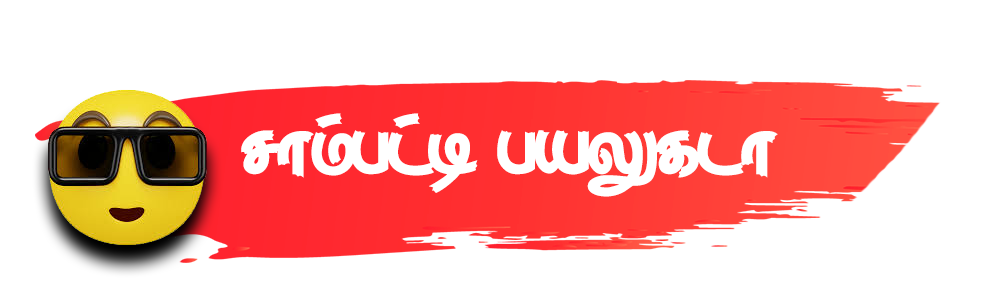
<style>
.page{position:relative;width:1000px;height:300px;background:#ffffff}
.page>*{position:absolute;margin:0}
.t1{font:107.7px "BAMINI-Tamil24";letter-spacing:-0.04em;color:#ffffff}
</style>
<div class="page">
<p class="t1" style="left:241px;top:113px;width:537px;height:84px">rhk;gl;b gaYflh</p>
</div>
